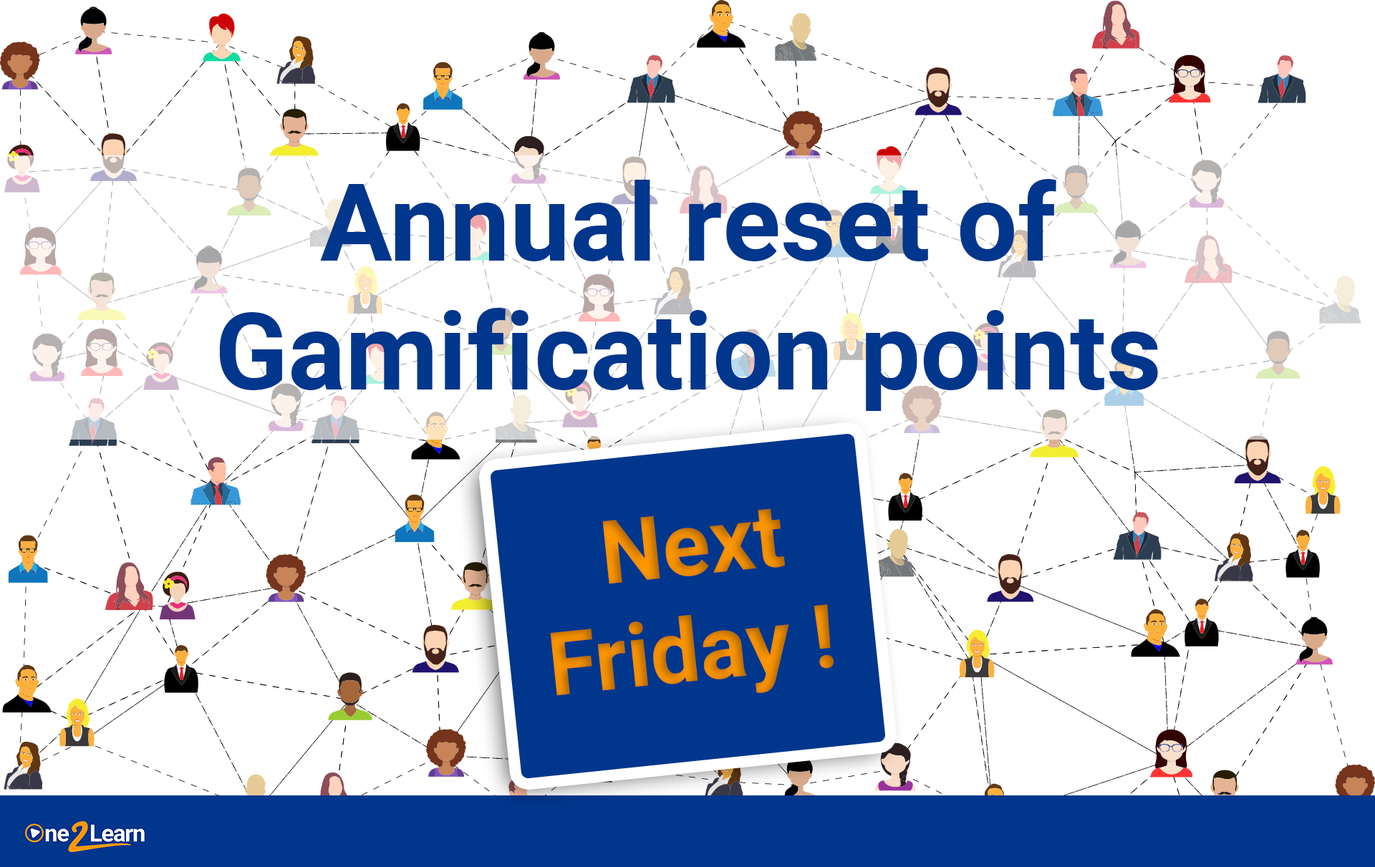
<style>
.page{position:relative;width:1375px;height:867px;background:#ffffff}
.page>*{position:absolute;margin:0}
.t1{font:107.4px "Roboto-Bold";color:#00368c}
.t2{font:88.1px "Roboto-Bold";color:#e68800}
</style>
<div class="page">
<p class="t1" style="left:219px;top:179px;width:939px;height:232px;text-align:center">Annual reset of<br>Gamification points</p>
<p class="t2" style="left:550px;top:508px;width:284px;height:188px;text-align:center;rotate:-6deg">Next<br>Friday !</p>
</div>
